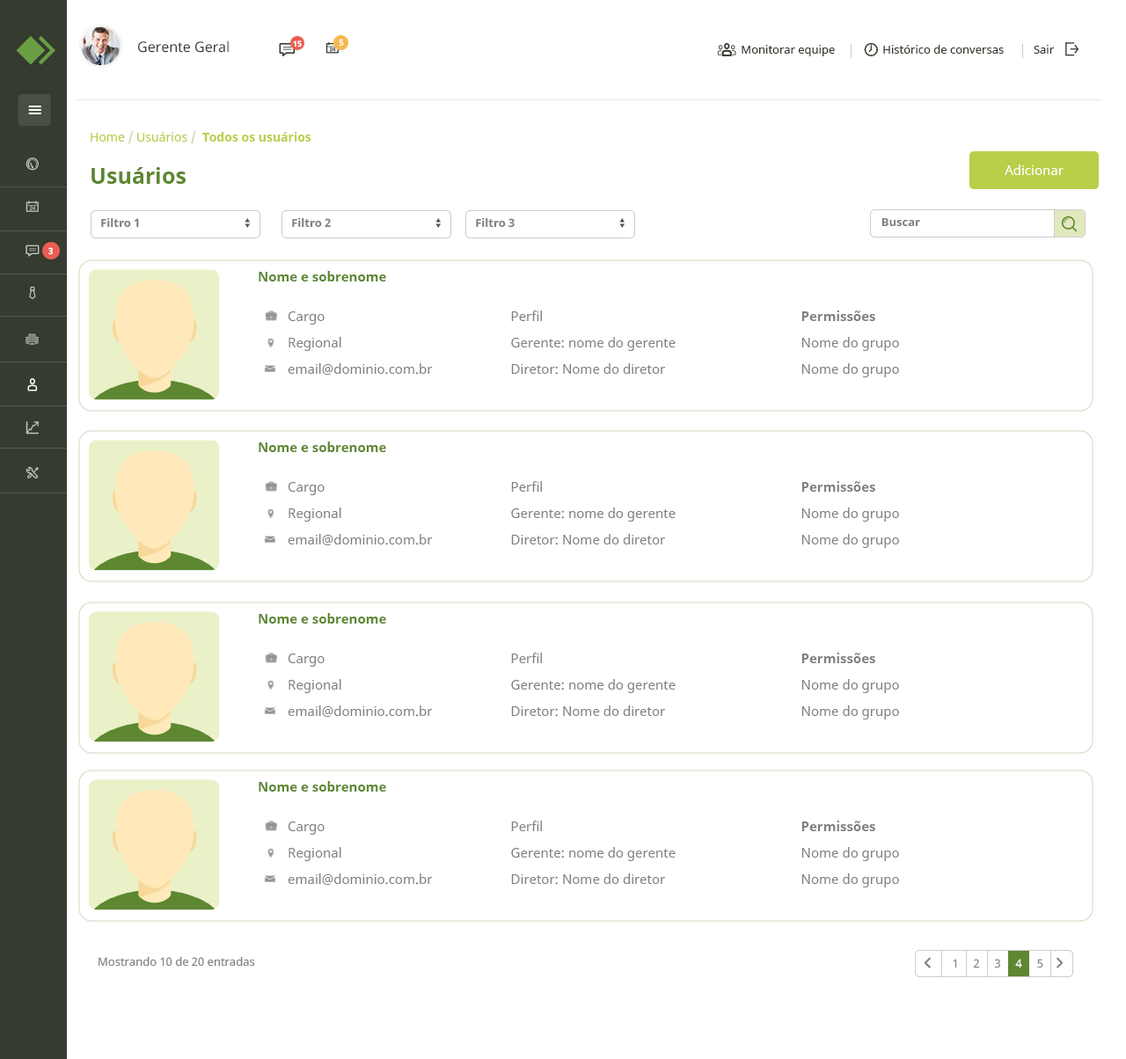
<style>
.page{position:relative;width:1126px;height:1059px;background:#ffffff}
.page>*{position:absolute;margin:0}
.t1{font:14.1px "NotoSans";color:#353b2f}
.t2{font:7.9px "NotoSans-Bold";color:#ffffff}
.t3{font:8.8px "NotoSans-Bold";color:#ffffff}
.t4{font:11.4px "NotoSans";color:#353b2f}
.t5{font:12.3px "NotoSans-Bold";color:#b8cf49}
.t6{font:12.3px "NotoSans";color:#b8cf49}
.t7{font:12.3px "NotoSans";color:#c7cfa1}
.t8{font:22px "NotoSans-Bold";color:#5d8730}
.t9{font:13.2px "NotoSans";color:#ffffff}
.t10{font:11.4px "NotoSans-Bold";color:#808080}
.t11{font:13.2px "NotoSans-Bold";color:#5d8730}
.t12{font:13.2px/26.4px "NotoSans";color:#808080}
.t13{font:13.2px/26.4px "NotoSans-Bold";color:#808080}
.t14{font:11.4px "NotoSans";color:#808080}
</style>
<div class="page">
<p class="t1" style="left:138px;top:40px;width:91px;height:13px">Gerente Geral</p>
<p class="t2" style="left:293px;top:40px;width:9px;height:7px">15</p>
<p class="t3" style="left:339px;top:39px;width:5px;height:8px">5</p>
<p class="t4" style="left:742px;top:45px;width:312px;height:11px">Monitorar equipe                Histórico de conversas          Sair</p>
<p class="t5" style="left:91px;top:131px;width:220px;height:13px"><span class="t6">Home </span><span class="t7">/</span><span class="t6"> Usuários </span><span class="t7">/  </span>Todos os usuários</p>
<p class="t8" style="left:91px;top:167px;width:95px;height:17px">Usuários</p>
<p class="t9" style="left:1005px;top:164px;width:58px;height:11px">Adicionar</p>
<p class="t10" style="left:101px;top:218px;width:38px;height:10px">Filtro 1</p>
<p class="t10" style="left:292px;top:218px;width:39px;height:10px">Filtro 2</p>
<p class="t10" style="left:476px;top:218px;width:39px;height:10px">Filtro 3</p>
<p class="t10" style="left:881px;top:218px;width:39px;height:8px">Buscar</p>
<p class="t3" style="left:48px;top:247px;width:5px;height:8px">3</p>
<p class="t11" style="left:259px;top:271px;width:127px;height:10px">Nome e sobrenome</p>
<p class="t12" style="left:288px;top:311px;width:145px;height:64px">Cargo<br>Regional<br>email@dominio.com.br</p>
<p class="t12" style="left:511px;top:311px;width:165px;height:64px">Perfil<br>Gerente: nome do gerente<br>Diretor: Nome do diretor</p>
<p class="t12" style="left:801px;top:311px;width:98px;height:66px"><span class="t13">Permissões<br></span>Nome do grupo<br>Nome do grupo</p>
<p class="t11" style="left:259px;top:442px;width:127px;height:10px">Nome e sobrenome</p>
<p class="t12" style="left:288px;top:482px;width:145px;height:63px">Cargo<br>Regional<br>email@dominio.com.br</p>
<p class="t12" style="left:511px;top:481px;width:165px;height:64px">Perfil<br>Gerente: nome do gerente<br>Diretor: Nome do diretor</p>
<p class="t12" style="left:801px;top:481px;width:98px;height:67px"><span class="t13">Permissões<br></span>Nome do grupo<br>Nome do grupo</p>
<p class="t11" style="left:259px;top:613px;width:127px;height:11px">Nome e sobrenome</p>
<p class="t12" style="left:288px;top:654px;width:145px;height:63px">Cargo<br>Regional<br>email@dominio.com.br</p>
<p class="t12" style="left:511px;top:653px;width:165px;height:64px">Perfil<br>Gerente: nome do gerente<br>Diretor: Nome do diretor</p>
<p class="t12" style="left:801px;top:653px;width:98px;height:67px"><span class="t13">Permissões<br></span>Nome do grupo<br>Nome do grupo</p>
<p class="t11" style="left:259px;top:781px;width:127px;height:11px">Nome e sobrenome</p>
<p class="t12" style="left:288px;top:822px;width:145px;height:63px">Cargo<br>Regional<br>email@dominio.com.br</p>
<p class="t12" style="left:511px;top:821px;width:165px;height:64px">Perfil<br>Gerente: nome do gerente<br>Diretor: Nome do diretor</p>
<p class="t12" style="left:801px;top:821px;width:98px;height:67px"><span class="t13">Permissões<br></span>Nome do grupo<br>Nome do grupo</p>
<p class="t14" style="left:99px;top:956px;width:156px;height:11px">Mostrando 10 de 20 entradas</p>
</div>
